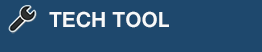
<style>
.page{position:relative;width:262px;height:52px;background:#1e486d}
.page>*{position:absolute;margin:0}
.t1{font:22.7px "Gautami-Bold";color:#f7f9fa}
</style>
<div class="page">
<p class="t1" style="left:49px;top:11px;width:120px;height:17px">TECH TOOL</p>
</div>
